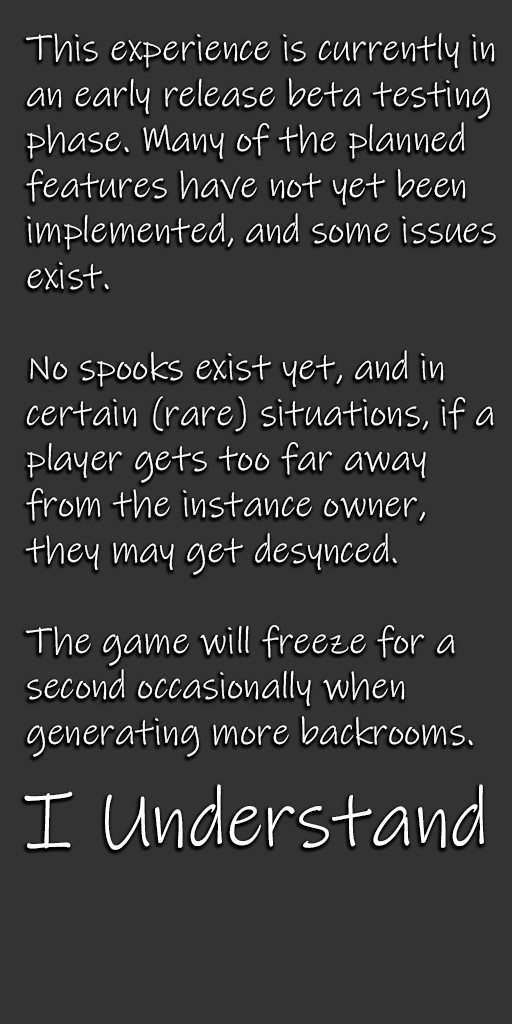
<style>
.page{position:relative;width:512px;height:1024px;background:#333333}
.page>*{position:absolute;margin:0}
.t1{font:38px "InkFree";color:#ffffff}
.t2{font:80px "InkFree";color:#ffffff}
</style>
<div class="page">
<p class="t1" style="left:25px;top:32px;width:471px;height:725px">This experience is currently in<br>an early release beta testing<br>phase. Many of the planned<br>features have not yet been<br>implemented, and some issues<br>exist.<br><br>No spooks exist yet, and in<br>certain (rare) situations, if a<br>player gets too far away<br>from the instance owner,<br>they may get desynced.<br><br>The game will freeze for a<br>second occasionally when<br>generating more backrooms.</p>
<p class="t2" style="left:24px;top:784px;width:460px;height:66px">I Understand</p>
</div>
